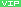
<style>
.page{position:relative;width:21px;height:7px;background:#49df62}
.page>*{position:absolute;margin:0}
.t1{font:8px "5x5-Pixel";color:#f8fff9}
</style>
<div class="page">
<p class="t1" style="left:2px;top:1px;width:17px;height:5px">vip</p>
</div>
